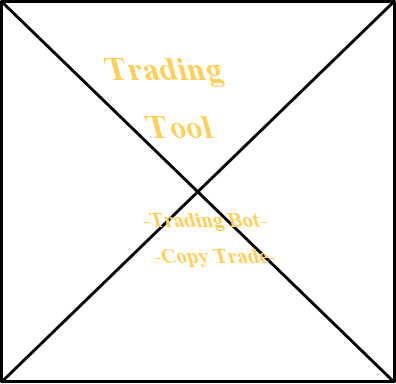
<style>
.page{position:relative;width:396px;height:384px;background:#ffffff}
.page>*{position:absolute;margin:0}
.t1{font:34.5px "TimesNewRomanPS-BoldMT";color:#fdd060;scale:0.97 1}
.t2{font:21.6px "TimesNewRomanPS-BoldMT";color:#fdd060;scale:0.97 1}
</style>
<div class="page">
<p class="t1" style="left:103px;top:58px;width:122px;height:80px;text-align:center">Trading<br>Tool</p>
<p class="t2" style="left:144px;top:213px;width:132px;height:54px;text-align:center">-Trading Bot-<br>-Copy Trade-</p>
</div>
